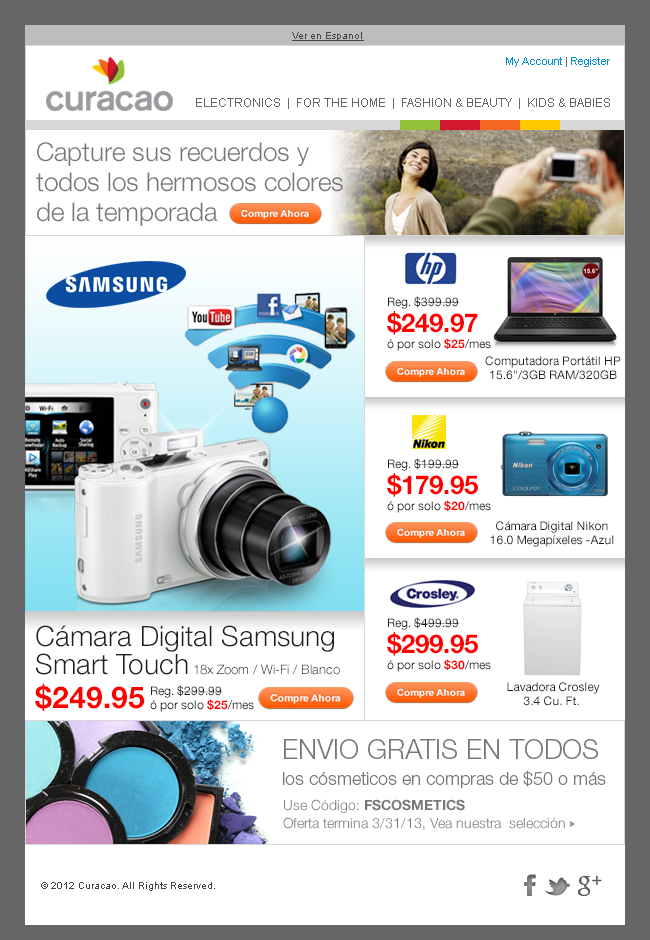
<style>
.page{position:relative;width:650px;height:940px;background:#ffffff}
.page>*{position:absolute;margin:0}
.t1{font:10px "ArialMT";color:#444444;text-decoration:underline}
.t2{font:11px "ArialMT";color:#008ecf}
.t3{font:11px "ArialMT";color:#666666}
.t4{font:12px "ArialMT";color:#666666}
.t5{font:26px/30px "HelveticaNeue-Light";color:#777777}
.t6{font:12px/18px "HelveticaNeue-Roman";color:#1e1e1e}
.t7{font:26px/26px "HelveticaNeue-Bold";color:#ff0000}
.t8{font:12px/16px "HelveticaNeue-Roman";color:#1e1e1e}
.t9{font:12px/16px "HelveticaNeue-Bold";color:#ff0000}
.t10{font:12px/14px "HelveticaNeue-Roman";color:#1e1e1e}
.t11{font:13px/28px "HelveticaNeue-Light";color:#1e1e1e}
.t12{font:28px/24px "HelveticaNeue-Light";color:#1e1e1e}
.t13{font:28px/28px "HelveticaNeue-Light";color:#1e1e1e}
.t14{font:30px/34px "HelveticaNeue-Bold";color:#ff0000}
.t15{font:12px/27px "HelveticaNeue-Roman"}
.t16{font:12px/14px "HelveticaNeue-Roman"}
.t17{font:12px/14px "HelveticaNeue-Bold"}
.t18{font:18px/26px "HelveticaNeue-Light";color:#777777}
.t19{font:27px/32px "HelveticaNeue-Light";color:#777777}
.t20{font:14px/18px "HelveticaNeue-Light";color:#777777}
.t21{font:14px/32px "HelveticaNeue-Light";color:#777777}
.t22{font:14px/32px "HelveticaNeue-Bold";color:#777777}
.t23{font:10px "ArialMT";color:#444444}
</style>
<div class="page">
<p class="t1" style="left:292px;top:32px;width:72px;height:9px">Ver en Espanol</p>
<p class="t2" style="left:506px;top:57px;width:104px;height:10px">My Account<span class="t3"> | </span>Register</p>
<p class="t4" style="left:196px;top:98px;width:414px;height:11px">ELECTRONICS  |  FOR THE HOME  |  FASHION &amp; BEAUTY  |  KIDS &amp; BABIES</p>
<p class="t5" style="left:36px;top:142px;width:307px;height:84px">Capture sus recuerdos y <br>todos los hermosos colores <br>de la temporada</p>
<p class="t6" style="left:387px;top:296px;width:104px;height:55px">Reg. $399.99<br><span class="t7">$249.97<br></span><span class="t8">ó por solo </span><span class="t9">$25</span><span class="t8">/mes</span></p>
<p class="t10" style="left:485px;top:356px;width:136px;height:24px;text-align:center">Computadora Portátil HP<br>15.6"/3GB RAM/320GB</p>
<p class="t6" style="left:387px;top:458px;width:104px;height:55px">Reg. $199.99<br><span class="t7">$179.95<br></span><span class="t8">ó por solo </span><span class="t9">$20</span><span class="t8">/mes</span></p>
<p class="t10" style="left:490px;top:521px;width:124px;height:26px;text-align:center">Cámara Digital Nikon<br>16.0 Megapíxeles -Azul</p>
<p class="t6" style="left:387px;top:617px;width:104px;height:55px">Reg. $499.99<br><span class="t7">$299.95<br></span><span class="t8">ó por solo </span><span class="t9">$30</span><span class="t8">/mes</span></p>
<p class="t11" style="left:35px;top:625px;width:305px;height:86px"><span class="t12">Cámara Digital Samsung<br></span><span class="t13">Smart Touch</span> 18x Zoom / Wi-Fi / Blanco<br><span class="t14">$249.95</span></p>
<p class="t15" style="left:150px;top:685px;width:104px;height:27px">Reg. $299.99<br><span class="t16">ó por solo </span><span class="t17">$25</span><span class="t16">/mes</span></p>
<p class="t10" style="left:507px;top:682px;width:93px;height:24px;text-align:center">Lavadora Crosley<br>3.4 Cu. Ft.</p>
<p class="t18" style="left:283px;top:739px;width:323px;height:49px"><span class="t19">ENVIO GRATIS EN TODOS<br></span>los cósmeticos en compras de $50 o más</p>
<p class="t20" style="left:283px;top:799px;width:282px;height:31px"><span class="t21">Use Código: </span><span class="t22">FSCOSMETICS<br></span>Oferta termina 3/31/13, Vea nuestra  selección</p>
<p class="t23" style="left:41px;top:882px;width:174px;height:9px">© 2012 Curacao. All Rights Reserved.</p>
</div>
